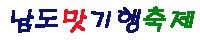
<style>
.page{position:relative;width:200px;height:40px;background:#ffffff}
.page>*{position:absolute;margin:0}
.t1{font:26.7px "H2porM";letter-spacing:-0.05em;color:#0b1472;font-weight:bold;font-style:italic}
.t2{font:26.7px "H2porM";letter-spacing:-0.05em;color:#f10d1d;font-weight:bold;font-style:italic}
.t3{font:26.7px "H2porM";letter-spacing:-0.05em;color:#058411;font-weight:bold;font-style:italic}
</style>
<div class="page">
<p class="t1" style="left:11px;top:6px;width:184px;height:27px">남도<span class="t2">맛</span>기행<span class="t3">축제</span></p>
</div>
